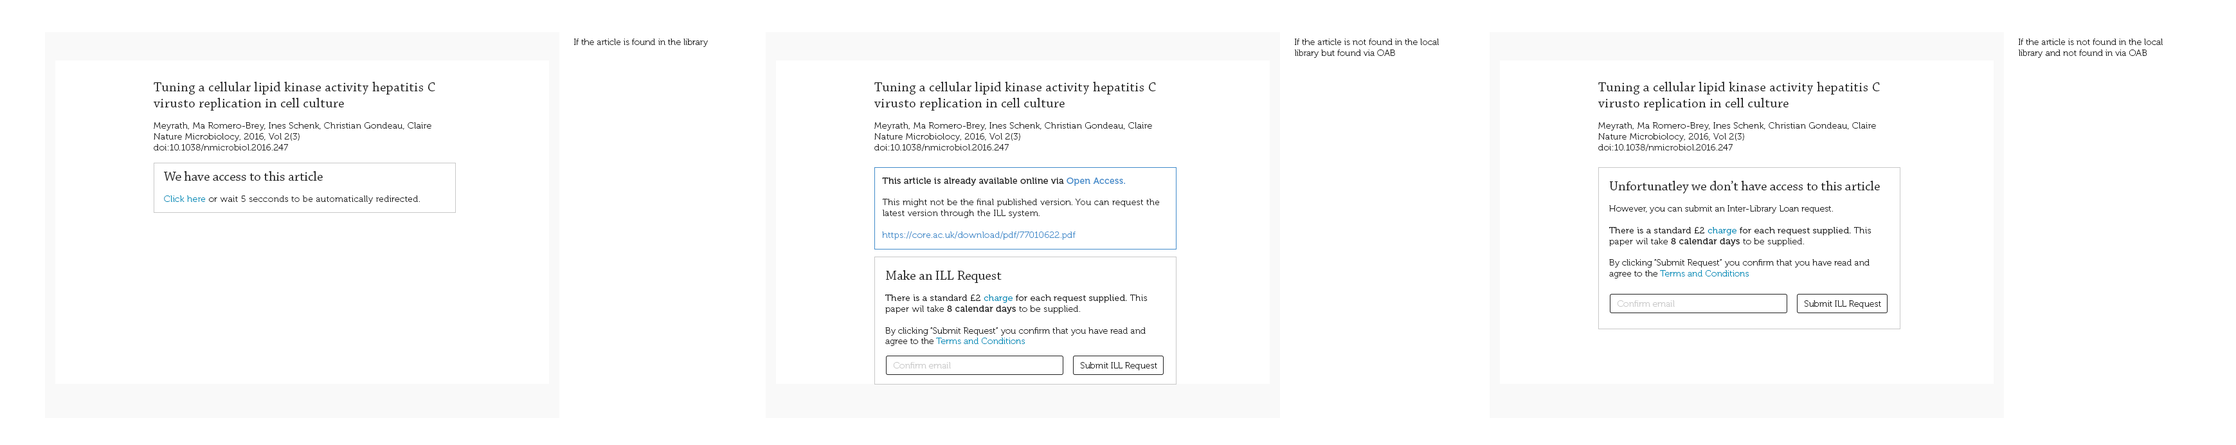
<style>
.page{position:relative;width:2236px;height:445px;background:#ffffff}
.page>*{position:absolute;margin:0}
.t1{font:9px "Museo-100";color:#222222}
.t2{font:9px "Museo-100";letter-spacing:0.025em;color:#222222}
.t3{font:13.5px "ChaparralPro-Regular";letter-spacing:0.025em;color:#222222}
.t4{font:13.5px "ChaparralPro-Regular";color:#222222}
.t5{font:9px "Museo-100";letter-spacing:0.025em;color:#008cb8}
.t6{font:9px "Museo-500";letter-spacing:0.025em;color:#222222}
.t7{font:9px "Museo-500";letter-spacing:0.025em;color:#428bca}
.t8{font:9px "Museo-100";letter-spacing:0.025em;color:#428bca}
.t9{font:9px "Museo-300";letter-spacing:0.025em;color:#222222}
.t10{font:9px "Museo-300";letter-spacing:0.025em;color:#008cb8}
.t11{font:9px "Museo-100";color:#008cb8}
.t12{font:9px "Museo-100";color:#c8c8c8}
</style>
<div class="page">
<p class="t1" style="left:574px;top:39px;width:134px;height:8px">If the article is found in the library</p>
<p class="t1" style="left:1295px;top:39px;width:144px;height:19px">If the article is not found in the local library but found via OAB</p>
<p class="t1" style="left:2019px;top:39px;width:144px;height:19px">If the article is not found in the local library and not found in via OAB</p>
<p class="t2" style="left:154px;top:82px;width:281px;height:69px"><span class="t3">Tuning a cellular lipid kinase activity hepatitis C virusto replication in cell culture<br></span><br>Meyrath, Ma Romero-Brey, Ines Schenk, Christian Gondeau, Claire<br>Nature Microbiolocy, 2016, Vol 2(3)<br>doi:10.1038/nmicrobiol.2016.247</p>
<p class="t2" style="left:874px;top:82px;width:282px;height:69px"><span class="t3">Tuning a cellular lipid kinase activity hepatitis C virusto replication in cell culture<br></span><br>Meyrath, Ma Romero-Brey, Ines Schenk, Christian Gondeau, Claire<br>Nature Microbiolocy, 2016, Vol 2(3)<br>doi:10.1038/nmicrobiol.2016.247</p>
<p class="t2" style="left:1598px;top:82px;width:282px;height:69px"><span class="t3">Tuning a cellular lipid kinase activity hepatitis C virusto replication in cell culture<br></span><br>Meyrath, Ma Romero-Brey, Ines Schenk, Christian Gondeau, Claire<br>Nature Microbiolocy, 2016, Vol 2(3)<br>doi:10.1038/nmicrobiol.2016.247</p>
<p class="t2" style="left:164px;top:171px;width:256px;height:33px"><span class="t4">We have access to this article<br><br></span><span class="t5">Click here </span>or wait 5 secconds to be automatically redirected.</p>
<p class="t2" style="left:882px;top:177px;width:278px;height:63px"><span class="t6">This article is already available online via </span><span class="t7">Open Access.<br></span><br>This might not be the final published version. You can request the latest version through the ILL system.<br><br><span class="t8">https://core.ac.uk/download/pdf/77010622.pdf</span></p>
<p class="t1" style="left:1609px;top:181px;width:271px;height:97px"><span class="t4">Unfortunatley we don’t have access to this article<br></span><br>However, you can submit an Inter-Library Loan request.<br><span class="t9"><br>There is a standard £2 </span><span class="t10">charge</span><span class="t9"> for each request supplied. </span><span class="t2">This paper wil take </span><span class="t6">8 calendar days</span><span class="t2"> to be supplied.<br><br></span>By clicking “Submit Request” you confirm that you have read and agree to the <span class="t11">Terms and Conditions</span></p>
<p class="t1" style="left:885px;top:270px;width:263px;height:76px"><span class="t4">Make an ILL Request<br><br></span><span class="t9">There is a standard £2 </span><span class="t10">charge</span><span class="t9"> for each request supplied. </span><span class="t2">This paper wil take </span><span class="t6">8 calendar days</span><span class="t2"> to be supplied.<br><br></span>By clicking “Submit Request” you confirm that you have read and agree to the <span class="t11">Terms and Conditions</span></p>
<p class="t12" style="left:1617px;top:300px;width:58px;height:7px">Confirm email</p>
<p class="t1" style="left:1804px;top:300px;width:77px;height:9px">Submit ILL Request</p>
<p class="t12" style="left:893px;top:362px;width:58px;height:6px">Confirm email</p>
<p class="t1" style="left:1080px;top:362px;width:77px;height:8px">Submit ILL Request</p>
</div>
